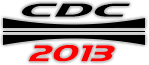
<style>
.page{position:relative;width:149px;height:65px;background:#000000}
.page>*{position:absolute;margin:0}
.t1{font:20.6px "QuickExpress";color:#000000;scale:1.7 1}
.t2{font:24.7px "QuickExpress";color:#ff0000;scale:0.93 1}
</style>
<div class="page">
<p class="t1" style="left:22px;top:3px;width:108px;height:14px">CDC</p>
<p class="t2" style="left:28px;top:45px;width:87px;height:17px">2013</p>
</div>
